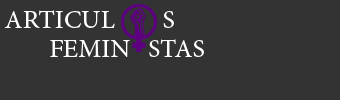
<style>
.page{position:relative;width:340px;height:100px;background:#333333}
.page>*{position:absolute;margin:0}
.t1{font:26.2px "MinionPro-Regular";color:#ffffff}
</style>
<div class="page">
<p class="t1" style="left:4px;top:10px;width:170px;height:18px">ARTICUL        S</p>
<p class="t1" style="left:50px;top:39px;width:154px;height:18px">FEMIN   STAS</p>
</div>
